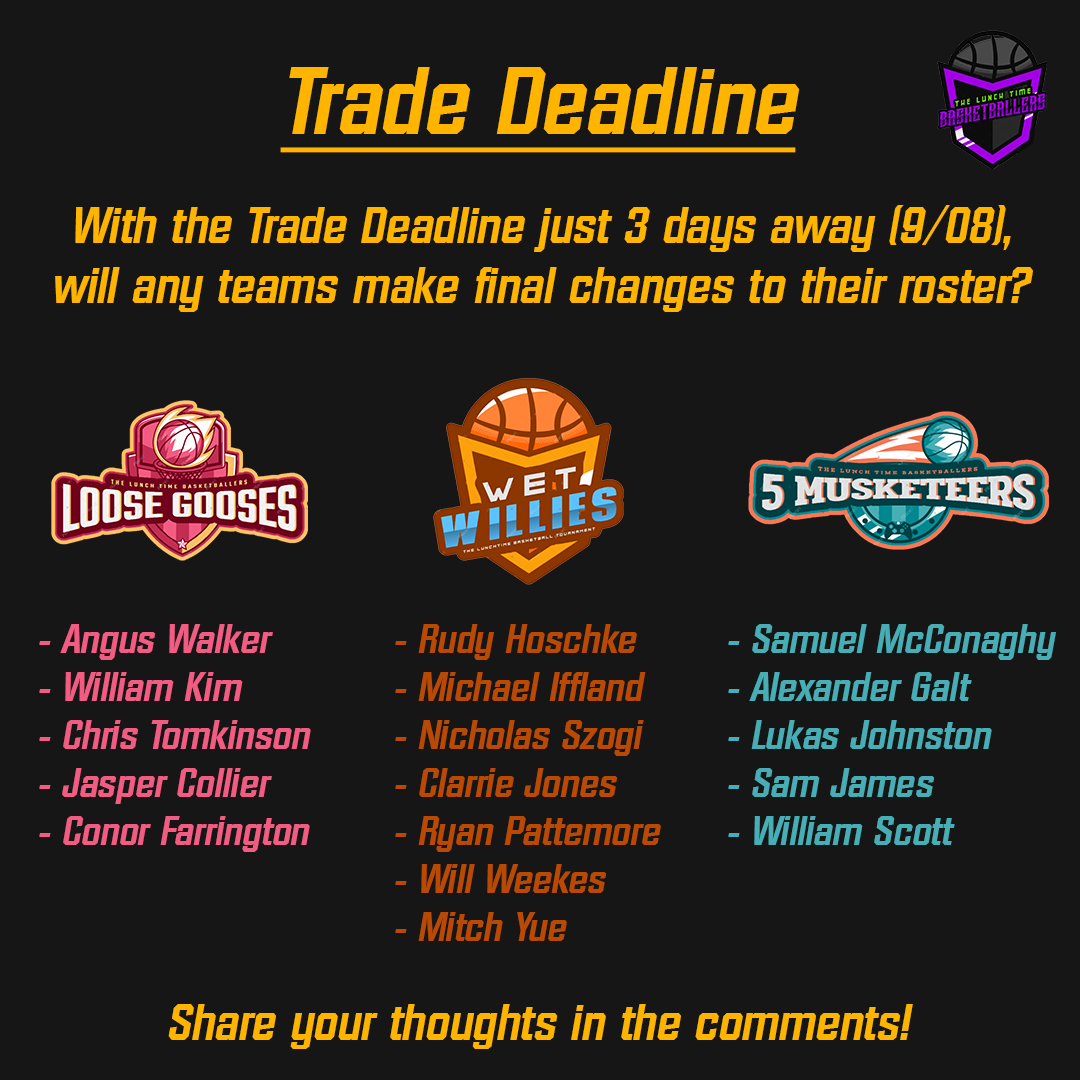
<style>
.page{position:relative;width:1080px;height:1080px;background:#161616}
.page>*{position:absolute;margin:0}
.t1{font:92.4px "Diamante-Serial-BoldItalic";color:#ffb400;text-decoration:underline}
.t2{font:50px "Diamante-Serial-BoldItalic";color:#ffb400}
.t3{font:40px "Diamante-Serial-BoldItalic";color:#f25c82}
.t4{font:40px "Diamante-Serial-BoldItalic";color:#ba4a03}
.t5{font:40px "Diamante-Serial-BoldItalic";color:#47aeb5}
</style>
<div class="page">
<p class="t1" style="left:280px;top:67px;width:520px;height:86px">Trade Deadline</p>
<p class="t2" style="left:55px;top:205px;width:978px;height:107px;text-align:center">With the Trade Deadline just 3 days away (9/08), will any teams make final changes to their roster?</p>
<p class="t3" style="left:39px;top:624px;width:272px;height:228px">- Angus Walker<br>- William Kim<br>- Chris Tomkinson<br>- Jasper Collier<br>- Conor Farrington</p>
<p class="t4" style="left:395px;top:624px;width:266px;height:317px">- Rudy Hoschke<br>- Michael Iffland<br>- Nicholas Szogi<br>- Clarrie Jones<br>- Ryan Pattemore<br>- Will Weekes<br>- Mitch Yue</p>
<p class="t5" style="left:728px;top:624px;width:328px;height:221px">- Samuel McConaghy<br>- Alexander Galt<br>- Lukas Johnston<br>- Sam James<br>- William Scott</p>
<p class="t2" style="left:168px;top:1004px;width:745px;height:45px">Share your thoughts in the comments!</p>
</div>
